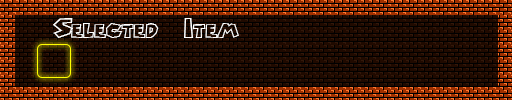
<style>
.page{position:relative;width:512px;height:100px;background:#200a00}
.page>*{position:absolute;margin:0}
.t1{font:24px "Chlorinap-Regular";letter-spacing:0.1em;color:#ffffff}
</style>
<div class="page">
<p class="t1" style="left:53px;top:18px;width:186px;height:20px">Selected Item</p>
</div>
